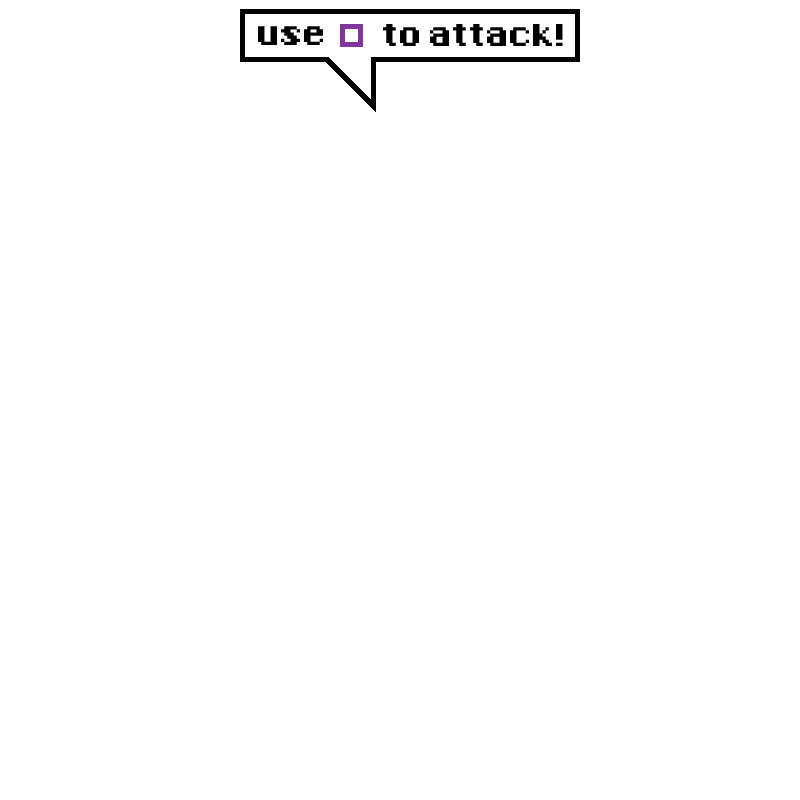
<style>
.page{position:relative;width:800px;height:800px;background:#ffffff}
.page>*{position:absolute;margin:0}
.t1{font:50px "8-Bit-Madness";letter-spacing:-0.04em;color:#000000}
.t2{font:12px/37.5px "8-Bit-Madness";letter-spacing:-0.04em;color:#000000}
</style>
<div class="page">
<p class="t1" style="left:258px;top:26px;width:65px;height:19px">use</p>
<p class="t2" style="left:383px;top:24px;width:180px;height:22px;text-align:center">to attack!</p>
</div>
